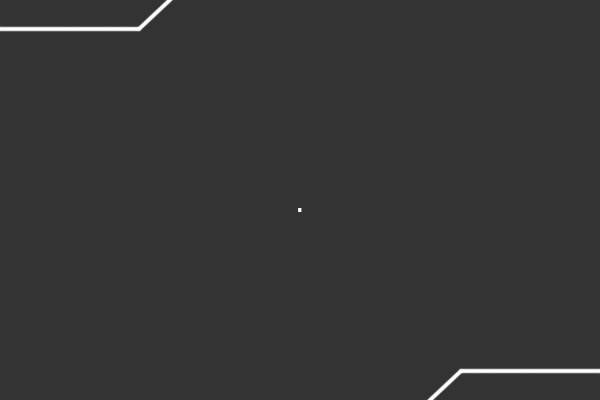
<style>
.page{position:relative;width:600px;height:400px;background:#333333}
.page>*{position:absolute;margin:0}
.t1{font:12px "Roboto-Light";color:#ffffff}
</style>
<div class="page">
<p class="t1" style="left:298px;top:208px;width:4px;height:4px">.</p>
</div>
